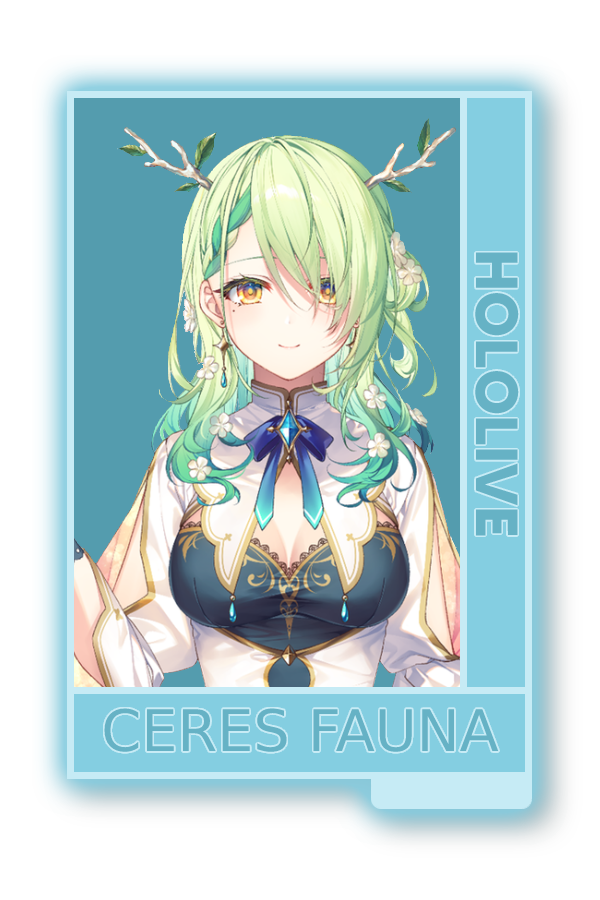
<style>
.page{position:relative;width:600px;height:900px;background:#ffffff}
.page>*{position:absolute;margin:0}
.t1{font:59.2px "MADETOMMY-Bold";color:#66b2c5}
.t2{font:57.3px "CoolveticaRg-Regular";color:#66b2c5}
</style>
<div class="page">
<p class="t1" style="left:475px;top:252px;width:44px;height:284px;rotate:90deg">HOLOLIVE</p>
<p class="t2" style="left:104px;top:708px;width:395px;height:44px">CERES FAUNA</p>
</div>
